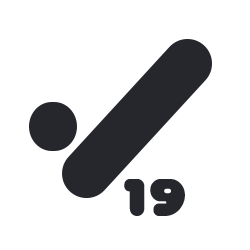
<style>
.page{position:relative;width:250px;height:250px;background:#ffffff}
.page>*{position:absolute;margin:0}
.t1{font:53px "YeyeyRegular";letter-spacing:0.06em;color:#25272d;scale:0.94 1}
</style>
<div class="page">
<p class="t1" style="left:124px;top:179px;width:61px;height:37px">19</p>
</div>
